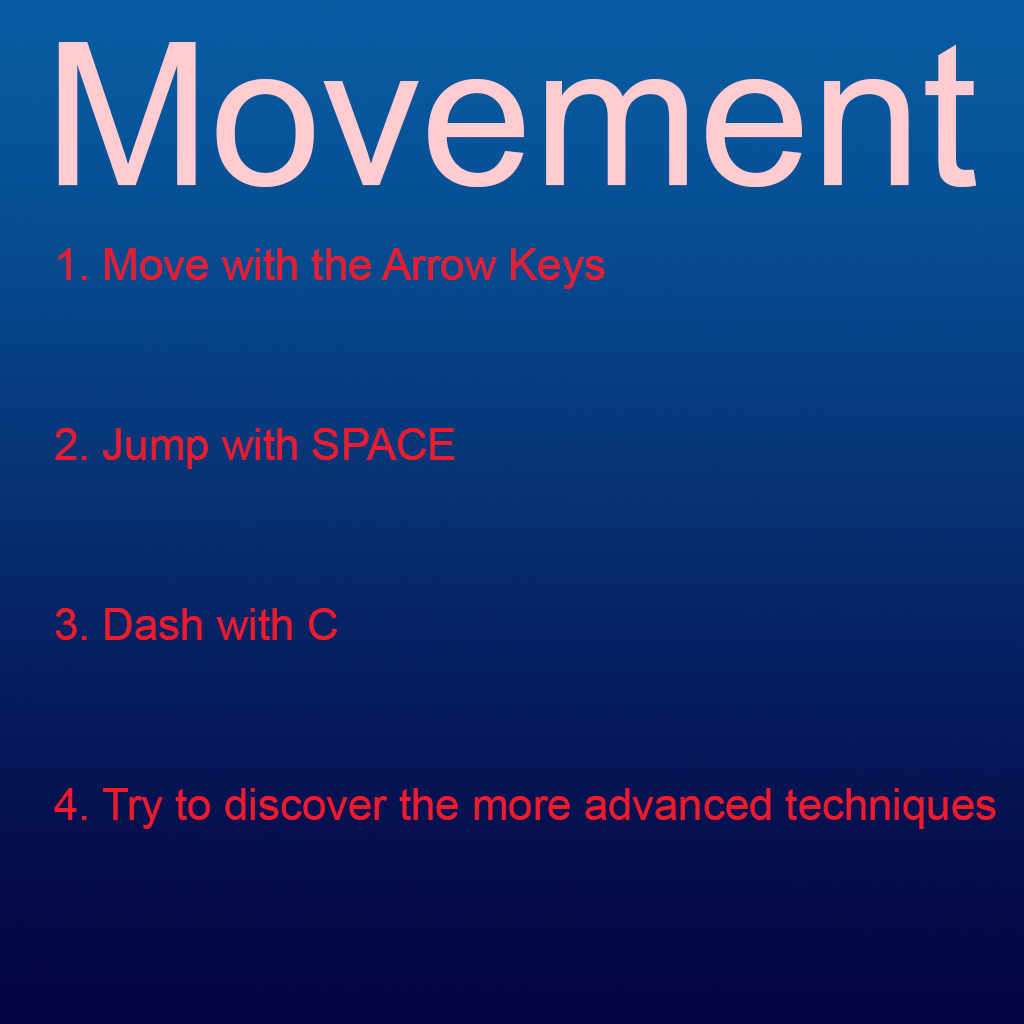
<style>
.page{position:relative;width:1024px;height:1024px}
.page>*{position:absolute;margin:0}
.t1{font:200px "ArialMT";color:#ffcdd1}
.t2{font:75px "ArialMT";color:#f01b2a}
</style>
<div class="page">
<p class="t1" style="left:58px;top:42px;width:919px;height:145px">Movement</p>
<p class="t2" style="left:54px;top:248px;width:942px;height:581px">1. Move with the Arrow Keys<br><br>2. Jump with SPACE<br><br>3. Dash with C<br><br>4. Try to discover the more advanced techniques</p>
</div>
